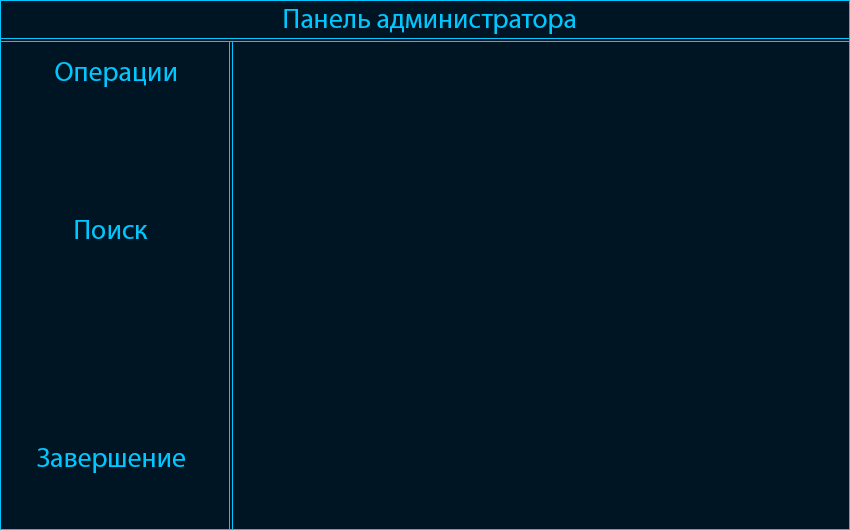
<style>
.page{position:relative;width:850px;height:530px;background:#001523}
.page>*{position:absolute;margin:0}
.t1{font:27.8px "MyriadPro-Regular";color:#00c7ff}
</style>
<div class="page">
<p class="t1" style="left:284px;top:9px;width:292px;height:25px">Панель администратора</p>
<p class="t1" style="left:55px;top:62px;width:121px;height:25px">Операции</p>
<p class="t1" style="left:75px;top:220px;width:73px;height:19px">Поиск</p>
<p class="t1" style="left:37px;top:448px;width:148px;height:25px">Завершение</p>
</div>
